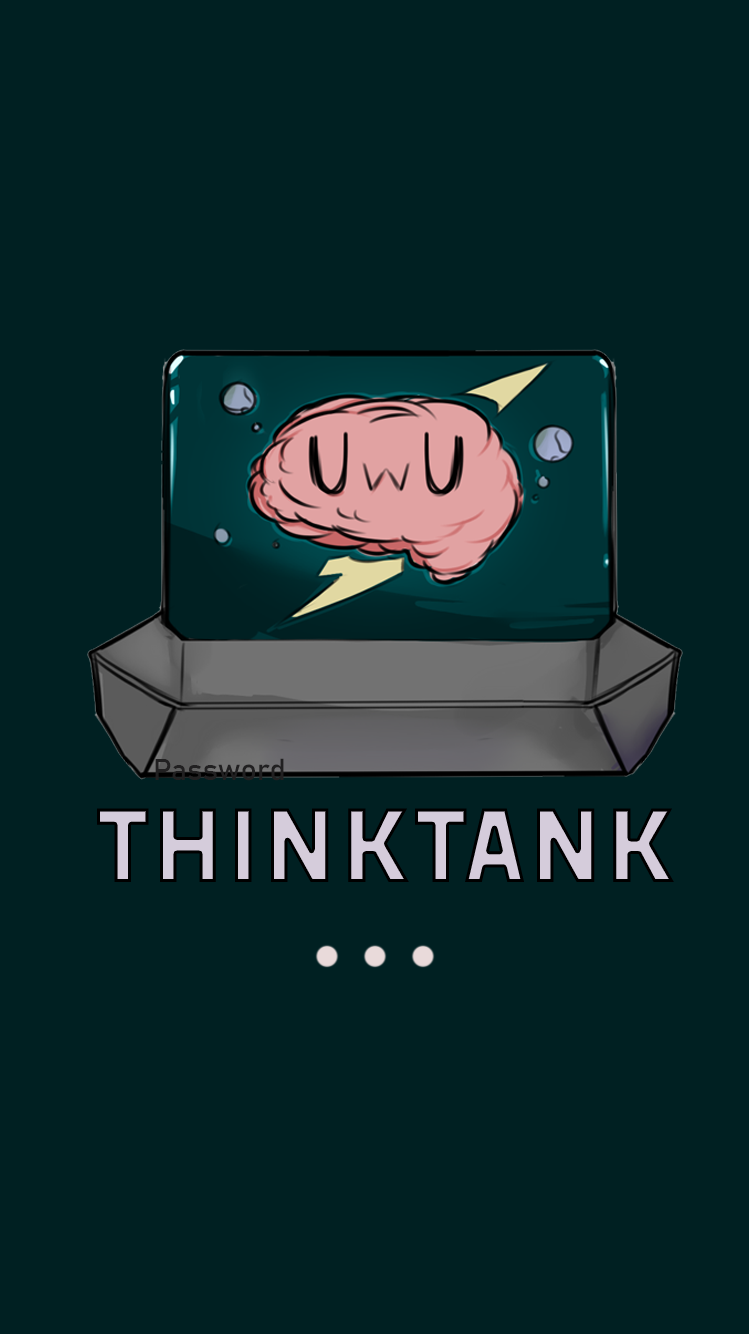
<style>
.page{position:relative;width:750px;height:1334px;background:#002022}
.page>*{position:absolute;margin:0}
.t1{font:30px "Bahnschrift";color:#212021}
.t2{font:100px "Trender";color:#d5ccdb}
</style>
<div class="page">
<p class="t1" style="left:155px;top:758px;width:129px;height:23px">Password</p>
<p class="t2" style="left:97px;top:808px;width:577px;height:74px">THINKTANK</p>
</div>
